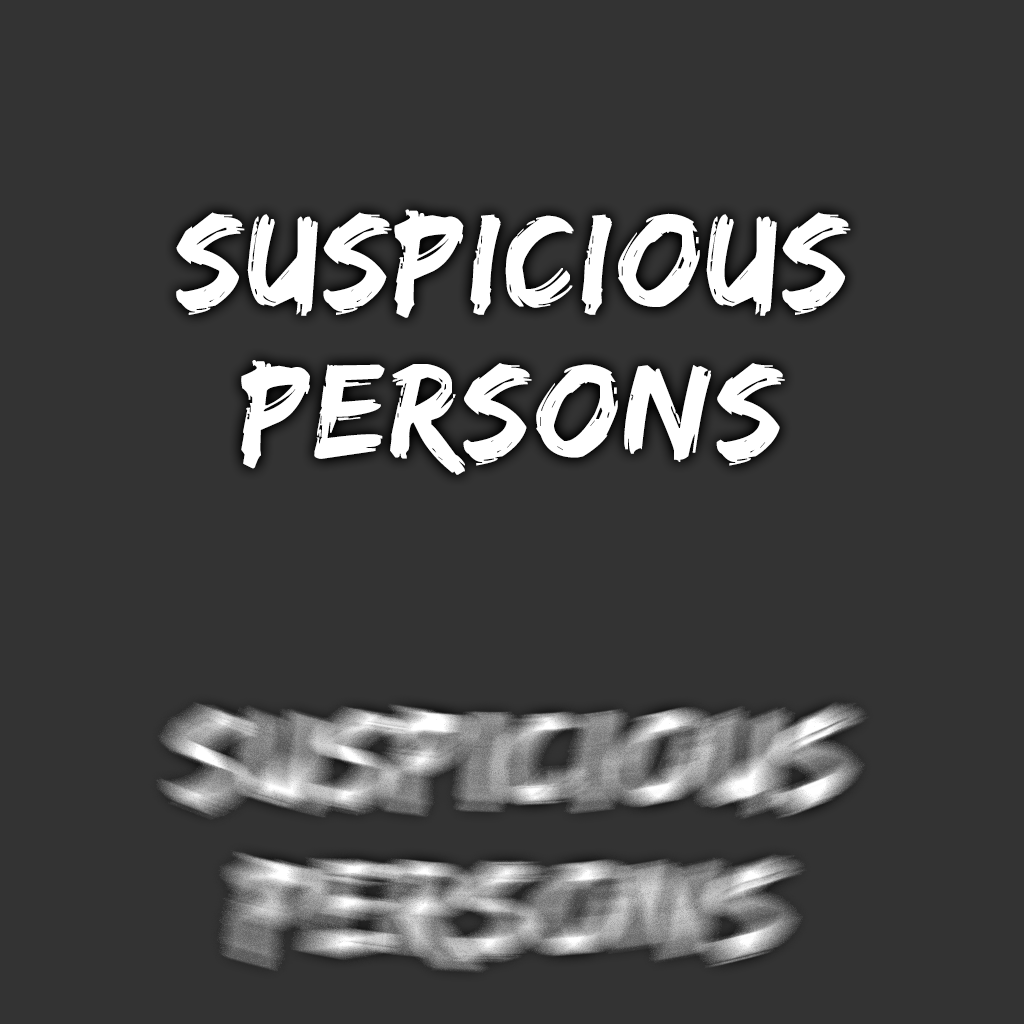
<style>
.page{position:relative;width:1024px;height:1024px;background:#333333}
.page>*{position:absolute;margin:0}
.t1{font:140px/25.1px "EdoSZ";letter-spacing:0.03em;color:#ffffff}
</style>
<div class="page">
<p class="t1" style="left:176px;top:209px;width:675px;height:266px;text-align:center">Suspicious <br><br><br><br><br><br>Persons</p>
</div>
